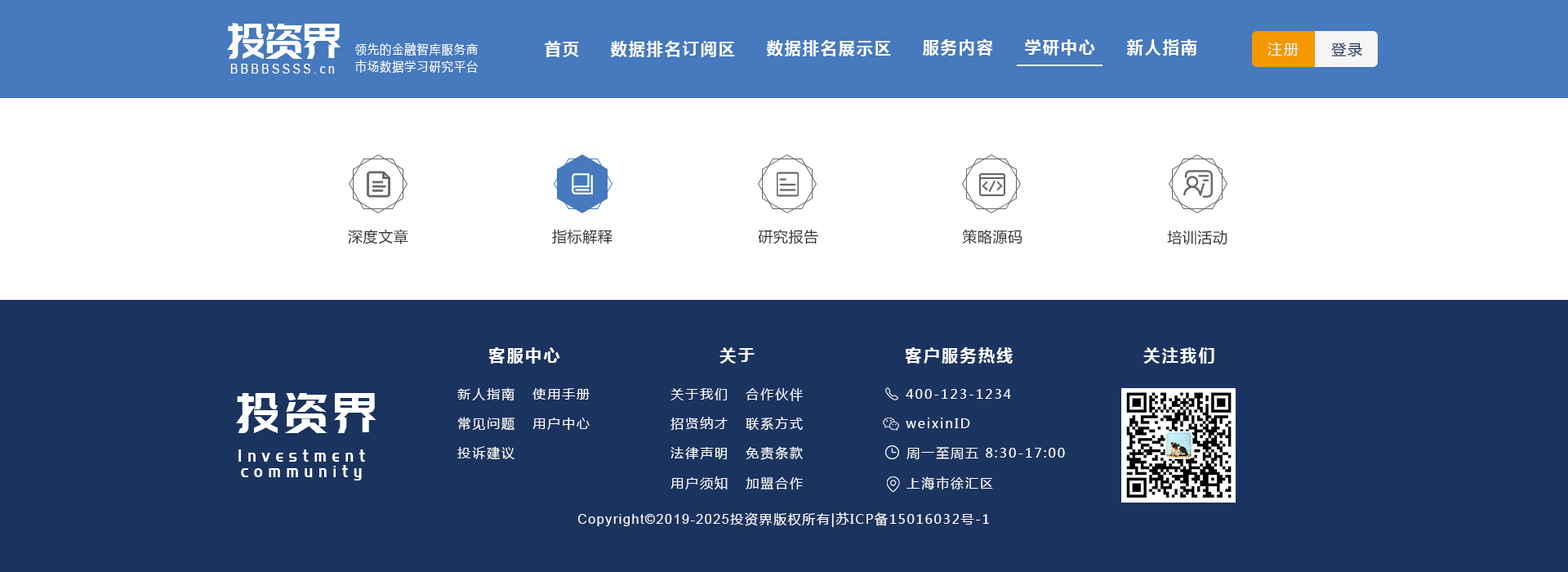
<style>
.page{position:relative;width:1568px;height:572px;background:#1b335f}
.page>*{position:absolute;margin:0}
.t1{font:48.6px "PangMenZhengDao";color:#ffffff;scale:0.86 1}
.t2{font:16.3px "MicrosoftYaHei-Bold";letter-spacing:0.1em;color:#ffffff}
.t3{font:13.1px "MicrosoftYaHei";letter-spacing:0.1em;color:#ffffff;scale:0.86 1}
.t4{font:14.7px "MicrosoftYaHei";letter-spacing:0.1em;color:#ffffff}
.t5{font:14.7px "MicrosoftYaHei";letter-spacing:0.1em;color:#1b335f}
.t6{font:13.1px "ArialMT";letter-spacing:0.26em;color:#ffffff;scale:0.86 1}
.t7{font:14.7px "MicrosoftYaHei";letter-spacing:0.03em;color:#333333}
.t8{font:16.3px "MicrosoftYaHei-Bold";letter-spacing:0.12em;color:#ffffff}
.t9{font:13.1px "MicrosoftYaHei";letter-spacing:0.12em;color:#ffffff}
.t10{font:55.5px "PangMenZhengDao";letter-spacing:0.1em;color:#ffffff;scale:0.86 1}
.t11{font:17.6px/15.4px "PangMenZhengDao";letter-spacing:0.36em;color:#ffffff;scale:0.86 1}
.t12{font:13.1px "MicrosoftYaHei";letter-spacing:0.1em;color:#ffffff}
.t13{font:13.1px "ArialMT";letter-spacing:0.1em;color:#ffffff}
</style>
<div class="page">
<p class="t1" style="left:227px;top:23px;width:114px;height:36px">投资界</p>
<p class="t2" style="left:545px;top:41px;width:34px;height:16px">首页</p>
<p class="t2" style="left:611px;top:41px;width:124px;height:16px">数据排名订阅区</p>
<p class="t2" style="left:767px;top:40px;width:124px;height:16px">数据排名展示区</p>
<p class="t2" style="left:923px;top:39px;width:70px;height:17px">服务内容</p>
<p class="t2" style="left:1025px;top:39px;width:70px;height:17px">学研中心</p>
<p class="t2" style="left:1126px;top:39px;width:71px;height:17px">新人指南</p>
<p class="t3" style="left:355px;top:42px;width:123px;height:14px">领先的金融智库服务商</p>
<p class="t4" style="left:1267px;top:42px;width:31px;height:14px">注册</p>
<p class="t5" style="left:1331px;top:42px;width:31px;height:15px">登录</p>
<p class="t6" style="left:230px;top:64px;width:104px;height:10px">BBBBSSSS.cn</p>
<p class="t3" style="left:355px;top:60px;width:123px;height:13px">市场数据学习研究平台</p>
<p class="t7" style="left:348px;top:229px;width:60px;height:15px">深度文章</p>
<p class="t7" style="left:552px;top:229px;width:60px;height:15px">指标解释</p>
<p class="t7" style="left:758px;top:229px;width:60px;height:15px">研究报告</p>
<p class="t7" style="left:962px;top:229px;width:60px;height:15px">策略源码</p>
<p class="t7" style="left:1167px;top:229px;width:60px;height:16px">培训活动</p>
<p class="t8" style="left:488px;top:347px;width:72px;height:16px">客服中心</p>
<p class="t8" style="left:719px;top:347px;width:36px;height:16px">关于</p>
<p class="t8" style="left:905px;top:347px;width:108px;height:16px">客户服务热线</p>
<p class="t8" style="left:1143px;top:347px;width:71px;height:16px">关注我们</p>
<p class="t9" style="left:457px;top:387px;width:57px;height:14px">新人指南</p>
<p class="t9" style="left:532px;top:388px;width:58px;height:11px">使用手册</p>
<p class="t9" style="left:670px;top:388px;width:57px;height:12px">关于我们</p>
<p class="t9" style="left:746px;top:388px;width:57px;height:13px">合作伙伴</p>
<p class="t9" style="left:906px;top:389px;width:105px;height:10px">400-123-1234</p>
<p class="t10" style="left:236px;top:393px;width:140px;height:40px">投资界</p>
<p class="t9" style="left:458px;top:416px;width:56px;height:14px">常见问题</p>
<p class="t9" style="left:532px;top:417px;width:58px;height:13px">用户中心</p>
<p class="t9" style="left:670px;top:416px;width:58px;height:14px">招贤纳才</p>
<p class="t9" style="left:746px;top:416px;width:57px;height:14px">联系方式</p>
<p class="t9" style="left:906px;top:417px;width:64px;height:11px">weixinID</p>
<p class="t11" style="left:238px;top:449px;width:127px;height:31px;text-align:center">Investment<br>community</p>
<p class="t9" style="left:457px;top:446px;width:57px;height:14px">投诉建议</p>
<p class="t9" style="left:670px;top:447px;width:57px;height:12px">法律声明</p>
<p class="t9" style="left:746px;top:446px;width:57px;height:14px">免责条款</p>
<p class="t9" style="left:906px;top:447px;width:159px;height:12px">周一至周五 8:30-17:00</p>
<p class="t9" style="left:670px;top:476px;width:58px;height:13px">用户须知</p>
<p class="t9" style="left:746px;top:477px;width:57px;height:12px">加盟合作</p>
<p class="t9" style="left:906px;top:476px;width:87px;height:14px">上海市徐汇区</p>
<p class="t12" style="left:578px;top:512px;width:411px;height:15px"><span class="t13">Copyright©2019-2025</span>投资界版权所有|苏ICP备15016032号-1</p>
</div>
